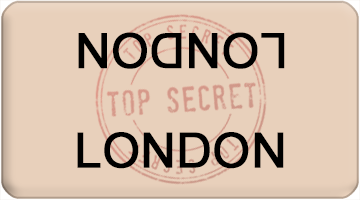
<style>
.page{position:relative;width:360px;height:200px;background:#e8d0bb}
.page>*{position:absolute;margin:0}
.t1{font:48px "ArialMT";color:#000000;font-weight:bold}
</style>
<div class="page">
<p class="t1" style="left:78px;top:32px;width:207px;height:37px;rotate:180deg">LONDON</p>
<p class="t1" style="left:77px;top:132px;width:207px;height:37px">LONDON</p>
</div>
